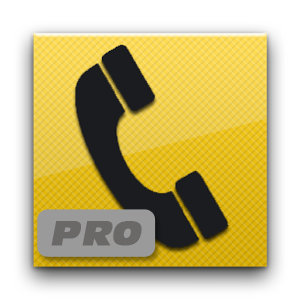
<style>
.page{position:relative;width:300px;height:300px}
.page>*{position:absolute;margin:0}
.t1{font:32.4px "Incised901BT-Compact";color:#6b6868;font-weight:bold;font-style:italic;scale:1.08 1}
</style>
<div class="page">
<p class="t1" style="left:51px;top:221px;width:91px;height:25px">PRO</p>
</div>
